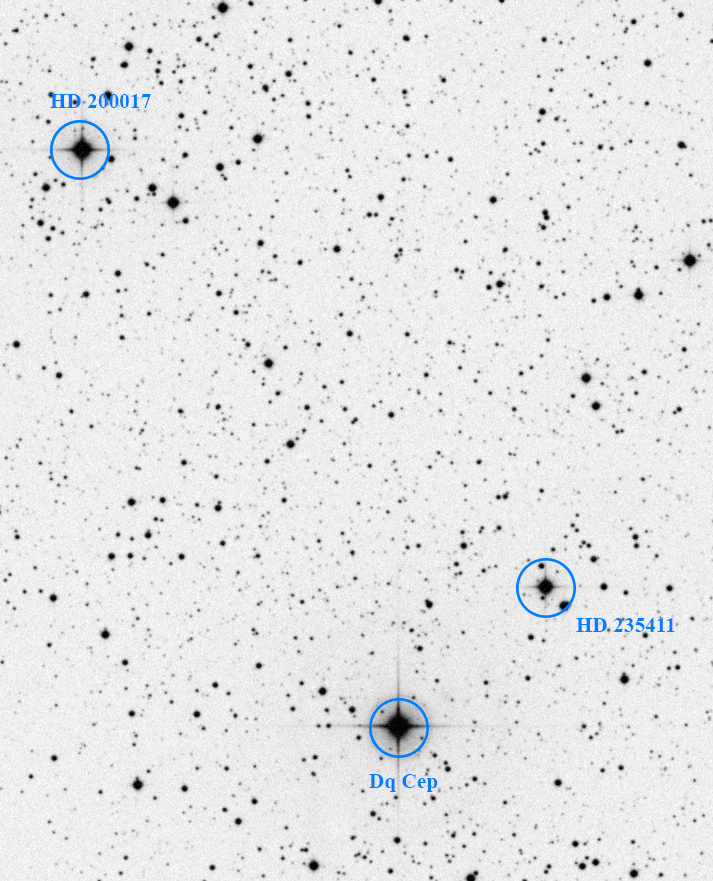
<style>
.page{position:relative;width:713px;height:881px}
.page>*{position:absolute;margin:0}
.t1{font:21.3px "TimesNewRomanPS-BoldMT";color:#007eff}
</style>
<div class="page">
<p class="t1" style="left:50px;top:94px;width:101px;height:14px">HD 200017</p>
<p class="t1" style="left:576px;top:618px;width:99px;height:14px">HD 235411</p>
<p class="t1" style="left:369px;top:774px;width:69px;height:18px">Dq Cep</p>
</div>
